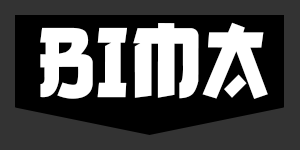
<style>
.page{position:relative;width:300px;height:150px;background:#000000}
.page>*{position:absolute;margin:0}
.t1{font:104.2px "GangofThree";color:#ffffff}
</style>
<div class="page">
<p class="t1" style="left:40px;top:22px;width:228px;height:77px">BIMA</p>
</div>
